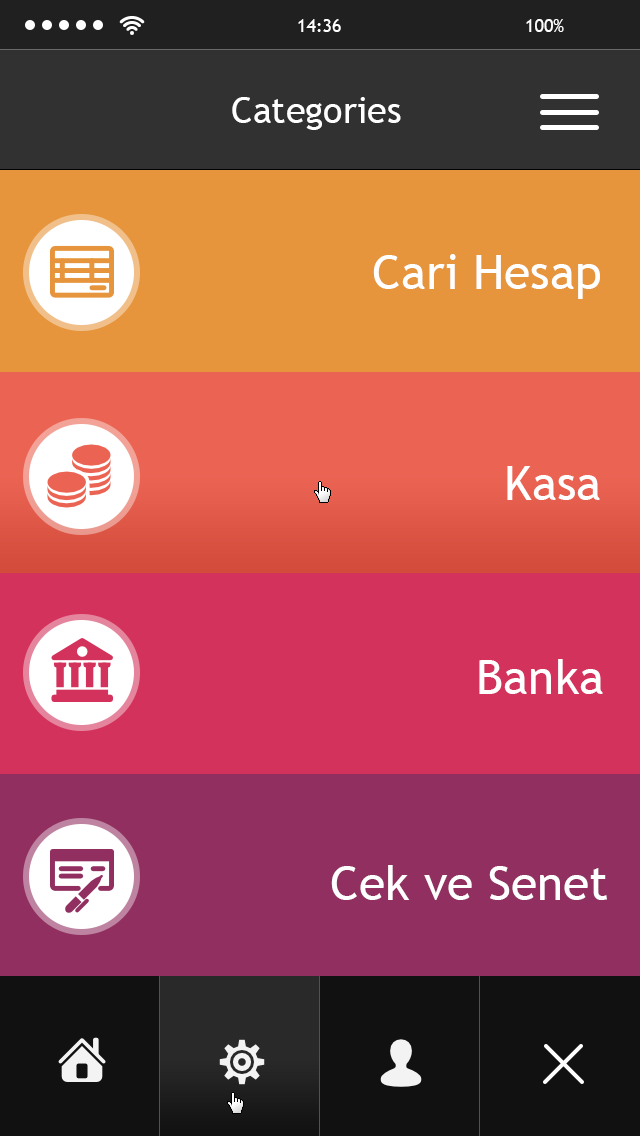
<style>
.page{position:relative;width:640px;height:1136px}
.page>*{position:absolute;margin:0}
.t1{font:36px "TrebuchetMS";color:#ffffff}
.t2{font:48px "TrebuchetMS";color:#ffffff}
</style>
<div class="page">
<p class="t1" style="left:232px;top:97px;width:169px;height:33px">Categories</p>
<p class="t2" style="left:373px;top:254px;width:227px;height:45px">Cari Hesap</p>
<p class="t2" style="left:507px;top:466px;width:93px;height:34px">Kasa</p>
<p class="t2" style="left:479px;top:659px;width:124px;height:35px">Banka</p>
<p class="t2" style="left:331px;top:865px;width:276px;height:35px">Cek ve Senet</p>
</div>
